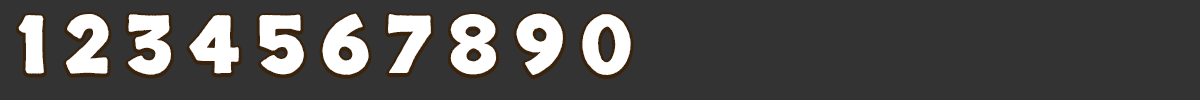
<style>
.page{position:relative;width:1200px;height:100px;background:#333333}
.page>*{position:absolute;margin:0}
.t1{font:80px "Skranji-Bold";letter-spacing:0.2em;color:#ffffff}
</style>
<div class="page">
<p class="t1" style="left:18px;top:13px;width:613px;height:62px">1234567890</p>
</div>
